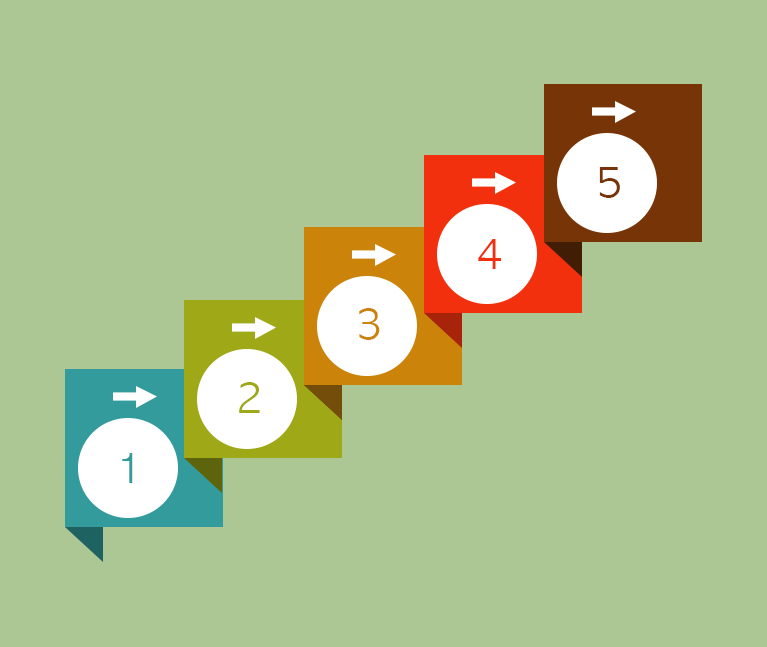
<style>
.page{position:relative;width:767px;height:647px;background:#acc793}
.page>*{position:absolute;margin:0}
.t1{font:40px "AppleGothic";color:#773407}
.t2{font:40px "AppleGothic";color:#f2300d}
.t3{font:40px "AppleGothic";color:#cb830a}
.t4{font:40px "AppleGothic";color:#9fa817}
.t5{font:40px "AppleGothic";color:#339b9e}
</style>
<div class="page">
<p class="t1" style="left:599px;top:167px;width:21px;height:31px">5</p>
<p class="t2" style="left:478px;top:239px;width:23px;height:30px">4</p>
<p class="t3" style="left:359px;top:308px;width:21px;height:32px">3</p>
<p class="t4" style="left:239px;top:382px;width:21px;height:31px">2</p>
<p class="t5" style="left:122px;top:453px;width:11px;height:30px">1</p>
</div>
